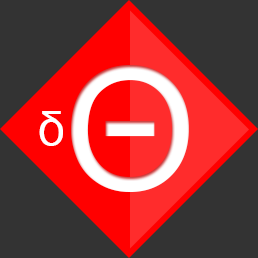
<style>
.page{position:relative;width:258px;height:258px;background:#333333}
.page>*{position:absolute;margin:0}
.t1{font:172px "ArialMT";color:#ffffff}
.t2{font:48px "ArialMT";color:#ffffff}
</style>
<div class="page">
<p class="t1" style="left:71px;top:65px;width:118px;height:127px">Θ</p>
<p class="t2" style="left:39px;top:111px;width:24px;height:35px">δ</p>
</div>
